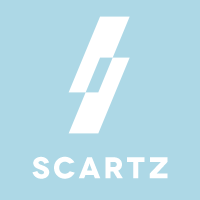
<style>
.page{position:relative;width:200px;height:200px;background:#add8e6}
.page>*{position:absolute;margin:0}
.t1{font:30px "Novecentowide-Bold";letter-spacing:0.1em;color:#ffffff}
</style>
<div class="page">
<p class="t1" style="left:32px;top:156px;width:136px;height:23px">Scartz</p>
</div>
